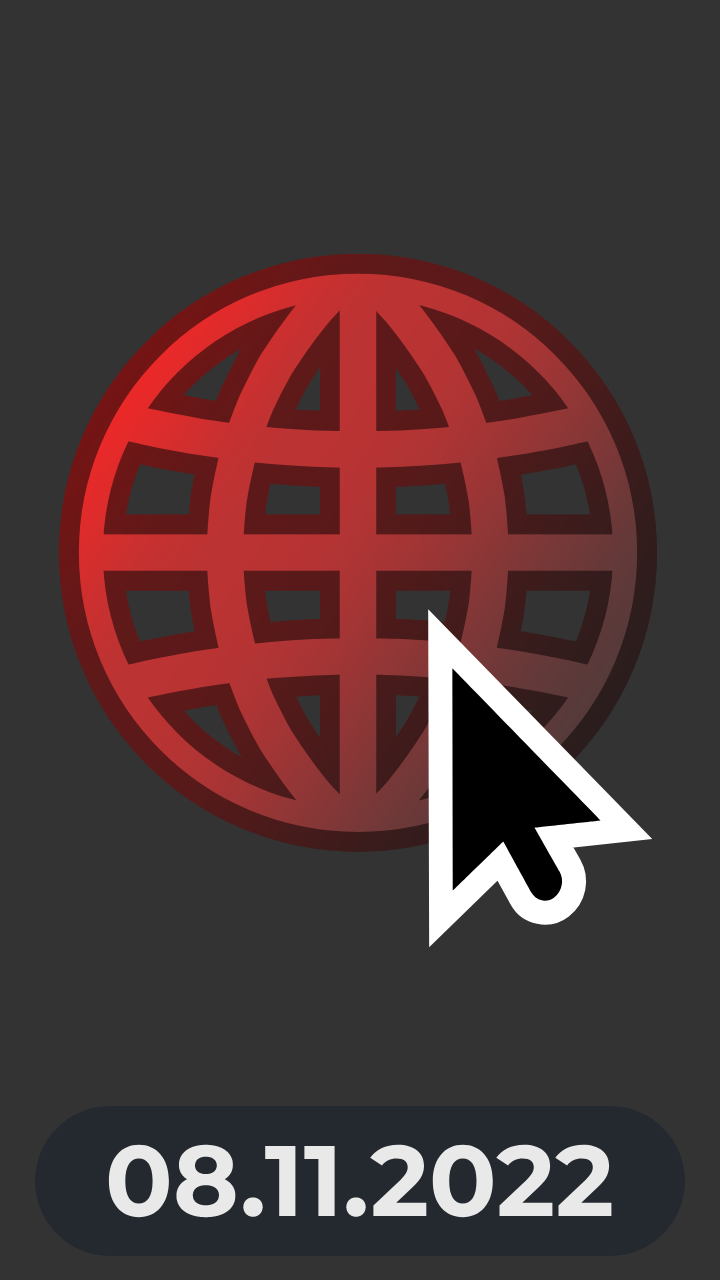
<style>
.page{position:relative;width:720px;height:1280px;background:#333333}
.page>*{position:absolute;margin:0}
.t1{font:100px "Montserrat-Bold";color:#e9e9e9}
</style>
<div class="page">
<p class="t1" style="left:108px;top:1144px;width:504px;height:74px">08.11.2022</p>
</div>
